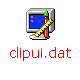
<style>
.page{position:relative;width:80px;height:80px;background:#ffffff}
.page>*{position:absolute;margin:0}
.t1{font:14px "MSReferenceSansSerif";color:#ff0100}
</style>
<div class="page">
<p class="t1" style="left:10px;top:47px;width:61px;height:14px">clipui.dat</p>
</div>
